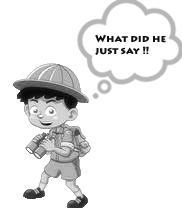
<style>
.page{position:relative;width:182px;height:208px;background:#ffffff}
.page>*{position:absolute;margin:0}
.t1{font:10px "LithosPro-Black";color:#101010}
</style>
<div class="page">
<p class="t1" style="left:95px;top:34px;width:71px;height:21px">What did he <br>just say !!</p>
</div>
